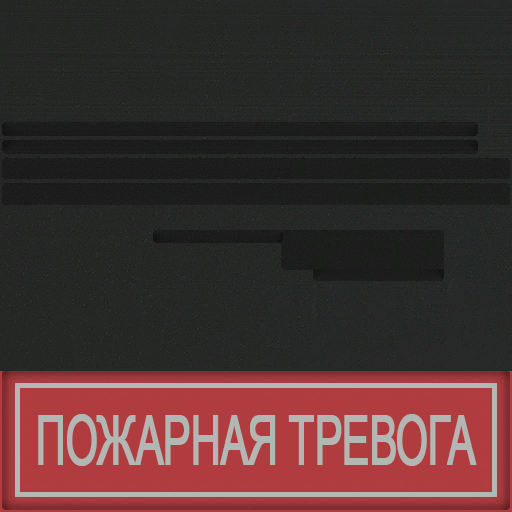
<style>
.page{position:relative;width:512px;height:512px}
.page>*{position:absolute;margin:0}
.t1{font:68px "ArialMT";letter-spacing:-0.04em;color:#b3b7b3;font-weight:bold;scale:0.62 1}
</style>
<div class="page">
<p class="t1" style="left:38px;top:414px;width:439px;height:52px">ПОЖАРНАЯ ТРЕВОГА</p>
</div>
